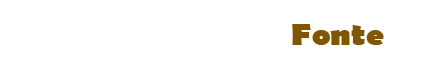
<style>
.page{position:relative;width:422px;height:66px;background:#ffffff}
.page>*{position:absolute;margin:0}
.t1{font:30px "BerlinSansFB-Bold";color:#805600;scale:1.14 1}
</style>
<div class="page">
<p class="t1" style="left:292px;top:24px;width:92px;height:21px">Fonte</p>
</div>
